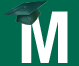
<style>
.page{position:relative;width:79px;height:66px;background:#006a4e}
.page>*{position:absolute;margin:0}
.t1{font:72px "HelveticaNeueLTPro-BdCn";color:#ffffff}
</style>
<div class="page">
<p class="t1" style="left:21px;top:11px;width:47px;height:52px">M</p>
</div>
